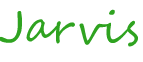
<style>
.page{position:relative;width:143px;height:62px;background:#ffffff}
.page>*{position:absolute;margin:0}
.t1{font:43.7px "SegoeScript";color:#30a420}
</style>
<div class="page">
<p class="t1" style="left:0px;top:9px;width:138px;height:38px">Jarvis</p>
</div>
